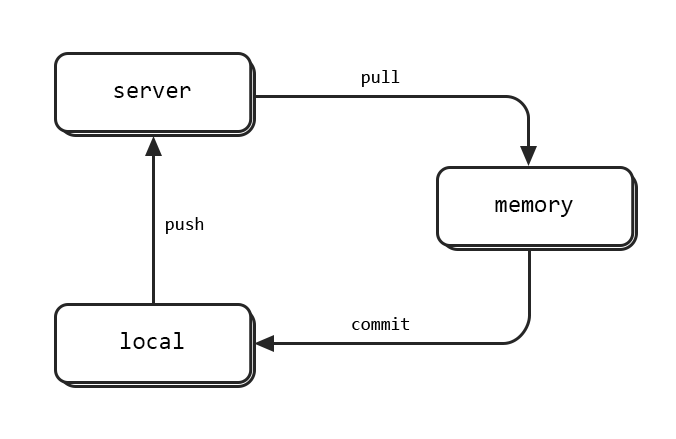
<style>
.page{position:relative;width:676px;height:439px;background:#ffffff}
.page>*{position:absolute;margin:0}
.t1{font:18px "Consolas";color:#000000}
.t2{font:24px "Consolas";color:#010101}
</style>
<div class="page">
<p class="t1" style="left:362px;top:70px;width:38px;height:17px">pull</p>
<p class="t2" style="left:114px;top:86px;width:77px;height:12px">server</p>
<p class="t2" style="left:495px;top:200px;width:78px;height:17px">memory</p>
<p class="t1" style="left:166px;top:217px;width:38px;height:17px">push</p>
<p class="t1" style="left:352px;top:317px;width:58px;height:13px">commit</p>
<p class="t2" style="left:120px;top:332px;width:64px;height:17px">local</p>
</div>
